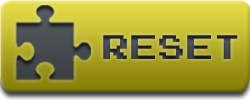
<style>
.page{position:relative;width:250px;height:100px}
.page>*{position:absolute;margin:0}
.t1{font:37px "Joystix"}
</style>
<div class="page">
<p class="t1" style="left:103px;top:35px;width:135px;height:24px">RESET</p>
</div>
